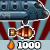
<style>
.page{position:relative;width:50px;height:50px}
.page>*{position:absolute;margin:0}
.t1{font:10px "MFWenYan_Noncommercial-Regular";letter-spacing:-0.06em;color:#ffffff}
</style>
<div class="page">
<p class="t1" style="left:18px;top:42px;width:23px;height:7px">1000</p>
</div>
